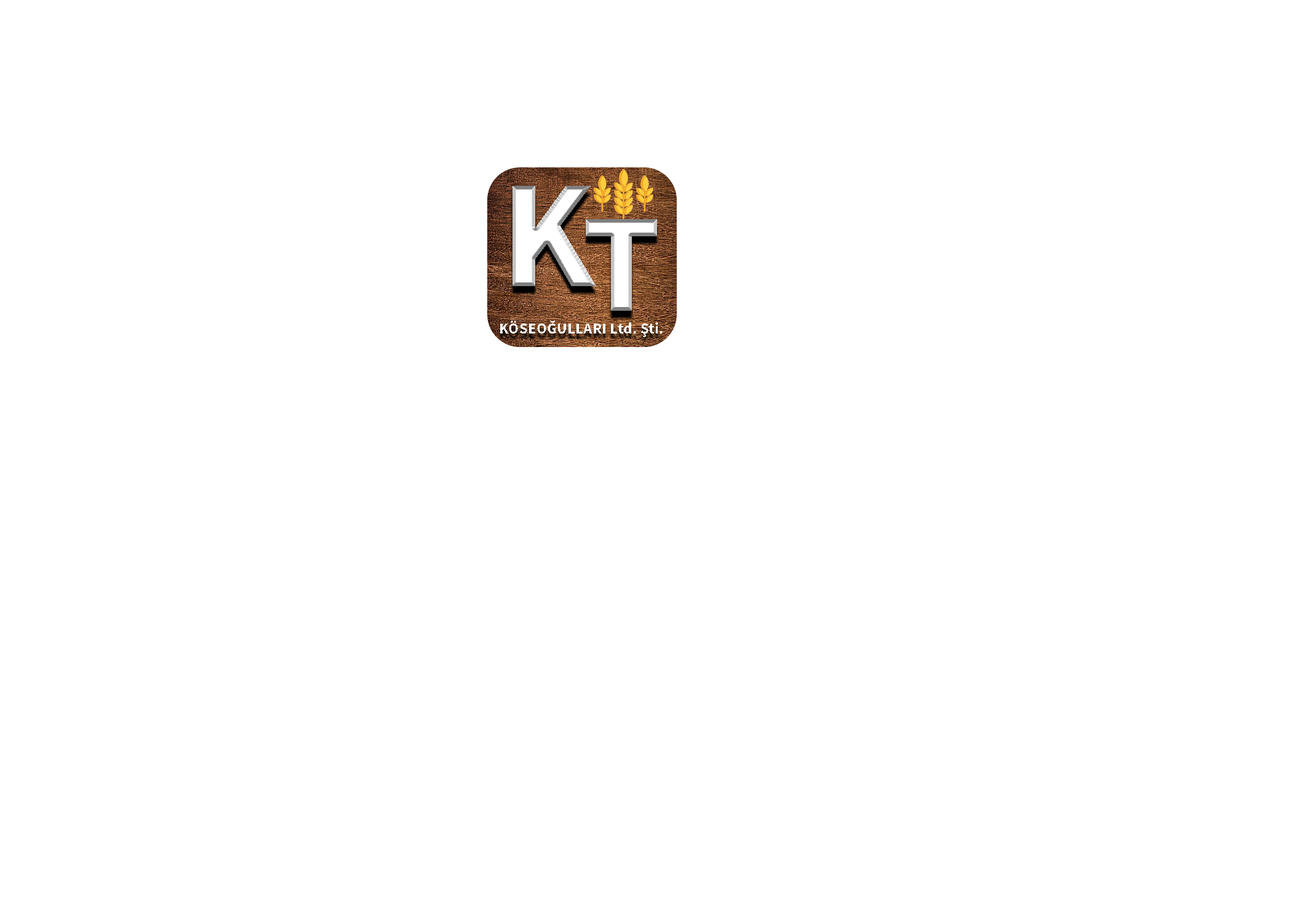
<style>
.page{position:relative;width:1292px;height:923px;background:#ffffff}
.page>*{position:absolute;margin:0}
.t1{font:153.8px "SourceSansRoman-Bold";letter-spacing:0.01em;color:#ffffff;font-style:italic}
.t2{font:141px "SourceSansRoman-Bold";letter-spacing:0.01em;font-style:italic}
.t3{font:15.4px "SourceSansRoman-Bold";letter-spacing:0.01em;color:#ffffff;font-style:italic}
</style>
<div class="page">
<p class="t1" style="left:513px;top:186px;width:83px;height:100px">K</p>
<p class="t2" style="left:586px;top:219px;width:71px;height:92px">T</p>
<p class="t3" style="left:500px;top:321px;width:163px;height:16px">KÖSEOĞULLARI Ltd. Şti.</p>
</div>
